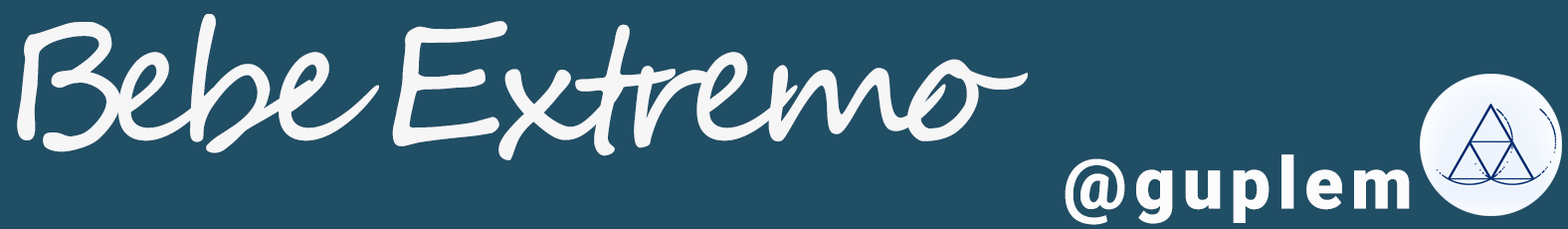
<style>
.page{position:relative;width:1568px;height:229px;background:#204e65}
.page>*{position:absolute;margin:0}
.t1{font:166.1px "SegoeScript";letter-spacing:-0.12em;color:#f6f6f7}
.t2{font:71.6px "Roboto-Black";letter-spacing:0.1em;color:#fcfcfc}
.t3{font:47.8px "Roboto-Black";letter-spacing:0.1em;color:#fcfcfc}
</style>
<div class="page">
<p class="t1" style="left:17px;top:14px;width:1011px;height:146px">Bebe Extremo</p>
<p class="t2" style="left:1065px;top:154px;width:345px;height:71px"><span class="t3"> <br></span>@guplem</p>
</div>
